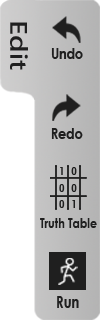
<style>
.page{position:relative;width:100px;height:320px;background:#ffffff}
.page>*{position:absolute;margin:0}
.t1{font:22.3px "MicrosoftJhengHeiBold";color:#1f1f1f;scale:1.22 1}
.t2{font:15.4px "CenturyGothic-Bold";color:#1f1f1f;scale:0.82 1}
.t3{font:10.8px "CenturyGothic-Bold";color:#1f1f1f;scale:0.82 1}
.t4{font:13.5px "CenturyGothic-Bold";color:#1f1f1f;scale:0.82 1}
.t5{font:16px "CenturyGothic-Bold";color:#1f1f1f;scale:0.82 1}
</style>
<div class="page">
<p class="t1" style="left:10px;top:22px;width:18px;height:48px;rotate:90deg">Edit</p>
<p class="t2" style="left:51px;top:48px;width:32px;height:11px">Undo</p>
<p class="t2" style="left:51px;top:128px;width:32px;height:11px">Redo</p>
<p class="t3" style="left:60px;top:167px;width:3px;height:8px">1</p>
<p class="t3" style="left:71px;top:167px;width:6px;height:8px">0</p>
<p class="t3" style="left:59px;top:184px;width:6px;height:8px">0</p>
<p class="t3" style="left:71px;top:184px;width:6px;height:8px">0</p>
<p class="t3" style="left:59px;top:200px;width:6px;height:8px">0</p>
<p class="t3" style="left:72px;top:200px;width:3px;height:8px">1</p>
<p class="t4" style="left:40px;top:218px;width:57px;height:10px">Truth Table</p>
<p class="t5" style="left:57px;top:296px;width:22px;height:12px">Run</p>
</div>
